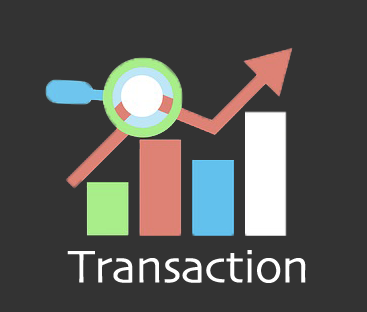
<style>
.page{position:relative;width:367px;height:312px;background:#333333}
.page>*{position:absolute;margin:0}
.t1{font:48px "Skia-Regular";letter-spacing:-0.02em;color:#ffffff}
</style>
<div class="page">
<p class="t1" style="left:67px;top:250px;width:239px;height:33px">Transaction</p>
</div>
